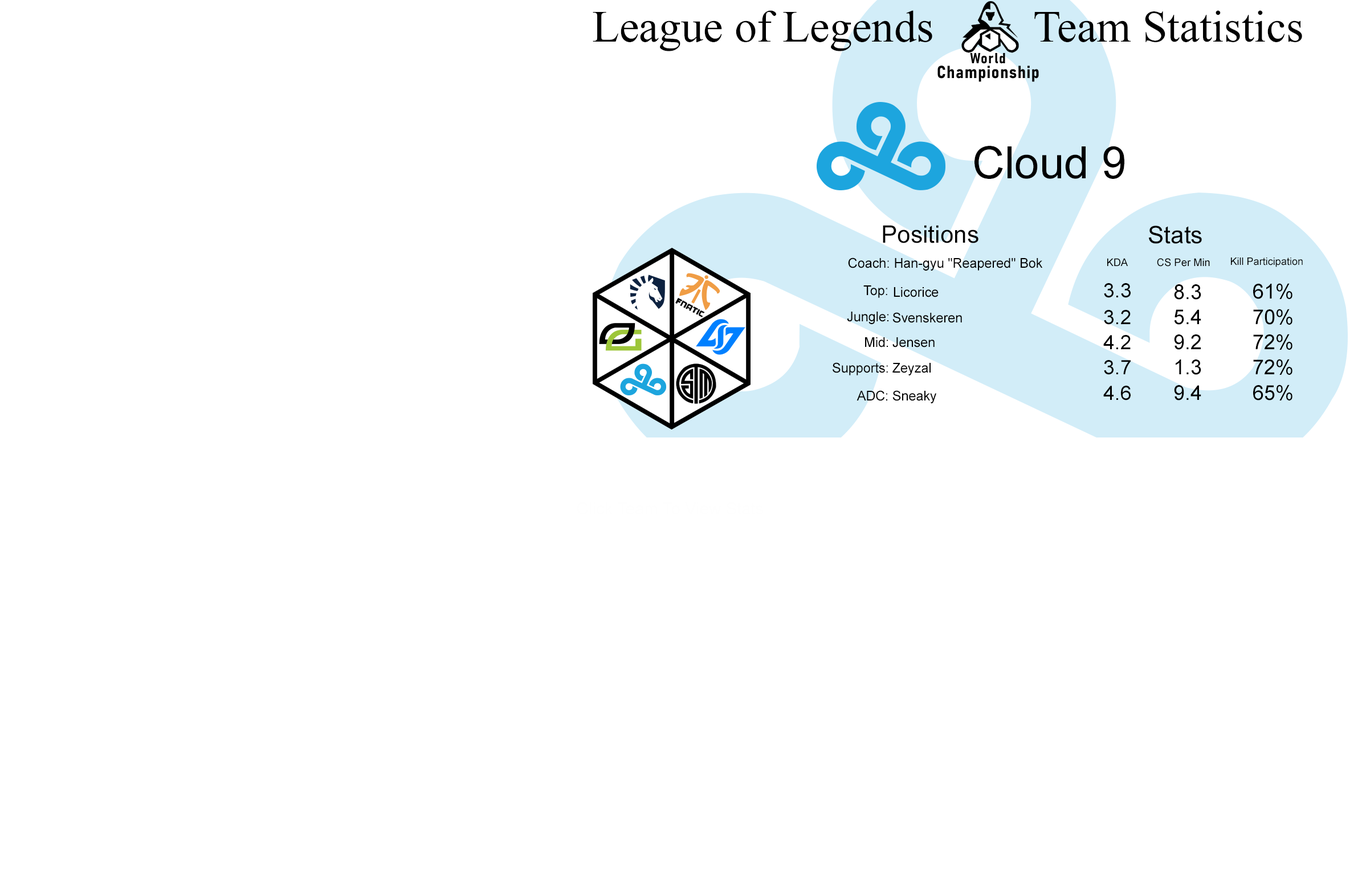
<style>
.page{position:relative;width:1362px;height:875px;background:#ffffff}
.page>*{position:absolute;margin:0}
.t1{font:44.6px "TimesNewRomanPSMT";color:#000000}
.t2{font:44.6px "ArialMT";color:#000000}
.t3{font:24.1px "ArialMT";color:#000000}
.t4{font:13.3px "ArialMT";color:#000000}
.t5{font:10.3px "ArialMT";color:#000000}
.t6{font:10.5px "ArialMT";color:#000000}
.t7{font:19.9px "ArialMT";color:#000000}
.t8{font:20.5px "ArialMT";color:#000000}
</style>
<div class="page">
<p class="t1" style="left:593px;top:10px;width:709px;height:41px">League of Legends         Team Statistics</p>
<p class="t2" style="left:975px;top:146px;width:149px;height:33px">Cloud 9</p>
<p class="t3" style="left:883px;top:225px;width:96px;height:18px">Positions</p>
<p class="t3" style="left:1149px;top:226px;width:53px;height:18px">Stats</p>
<p class="t4" style="left:848px;top:258px;width:195px;height:13px">Coach: Han-gyu "Reapered" Bok</p>
<p class="t5" style="left:1231px;top:258px;width:72px;height:9px">Kill Participation</p>
<p class="t5" style="left:1107px;top:258px;width:21px;height:8px">KDA</p>
<p class="t6" style="left:1157px;top:258px;width:53px;height:9px">CS Per Min</p>
<p class="t4" style="left:863px;top:286px;width:24px;height:12px">Top:</p>
<p class="t4" style="left:894px;top:287px;width:45px;height:11px">Licorice</p>
<p class="t7" style="left:1104px;top:283px;width:27px;height:15px">3.3</p>
<p class="t8" style="left:1174px;top:284px;width:27px;height:16px">8.3</p>
<p class="t8" style="left:1253px;top:283px;width:40px;height:16px">61%</p>
<p class="t4" style="left:847px;top:312px;width:42px;height:12px">Jungle:</p>
<p class="t4" style="left:893px;top:312px;width:69px;height:11px">Svenskeren</p>
<p class="t7" style="left:1104px;top:310px;width:27px;height:15px">3.2</p>
<p class="t8" style="left:1174px;top:309px;width:27px;height:16px">5.4</p>
<p class="t8" style="left:1253px;top:309px;width:40px;height:16px">70%</p>
<p class="t4" style="left:865px;top:337px;width:23px;height:11px">Mid:</p>
<p class="t4" style="left:893px;top:337px;width:42px;height:11px">Jensen</p>
<p class="t7" style="left:1103px;top:335px;width:28px;height:14px">4.2</p>
<p class="t8" style="left:1174px;top:335px;width:27px;height:15px">9.2</p>
<p class="t8" style="left:1253px;top:334px;width:40px;height:16px">72%</p>
<p class="t4" style="left:833px;top:362px;width:55px;height:14px">Supports:</p>
<p class="t4" style="left:893px;top:363px;width:38px;height:13px">Zeyzal</p>
<p class="t7" style="left:1104px;top:360px;width:27px;height:15px">3.7</p>
<p class="t8" style="left:1176px;top:360px;width:25px;height:15px">1.3</p>
<p class="t8" style="left:1253px;top:359px;width:40px;height:16px">72%</p>
<p class="t7" style="left:1103px;top:386px;width:28px;height:15px">4.6</p>
<p class="t8" style="left:1174px;top:385px;width:27px;height:16px">9.4</p>
<p class="t8" style="left:1253px;top:385px;width:40px;height:16px">65%</p>
<p class="t4" style="left:857px;top:390px;width:30px;height:11px">ADC:</p>
<p class="t4" style="left:893px;top:390px;width:43px;height:14px">Sneaky</p>
</div>
